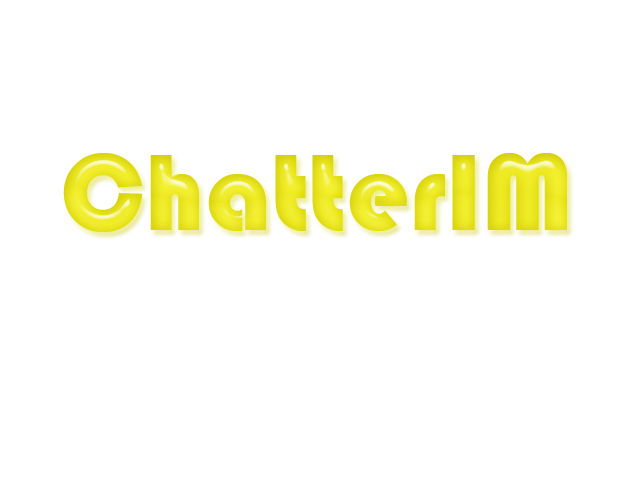
<style>
.page{position:relative;width:640px;height:480px;background:#ffffff}
.page>*{position:absolute;margin:0}
.t1{font:112.3px "Bauhaus93";color:#eae622}
</style>
<div class="page">
<p class="t1" style="left:63px;top:153px;width:504px;height:79px">ChatterIM</p>
</div>
